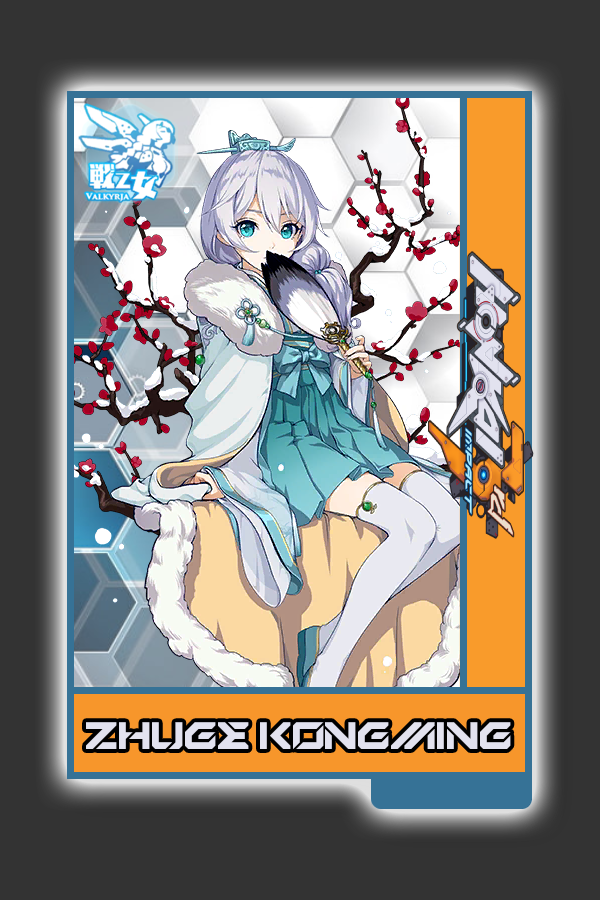
<style>
.page{position:relative;width:600px;height:900px;background:#333333}
.page>*{position:absolute;margin:0}
.t1{font:26.8px "Mechsuit";color:#e2e2ef}
</style>
<div class="page">
<p class="t1" style="left:86px;top:722px;width:425px;height:27px">Zhuge Kongming</p>
</div>
